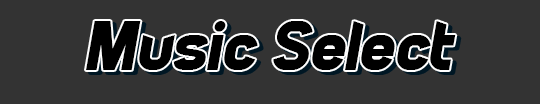
<style>
.page{position:relative;width:540px;height:104px;background:#333333}
.page>*{position:absolute;margin:0}
.t1{font:72px "PiratesofCydonia";color:#000000;font-style:italic}
</style>
<div class="page">
<p class="t1" style="left:86px;top:21px;width:370px;height:49px">Music Select</p>
</div>
